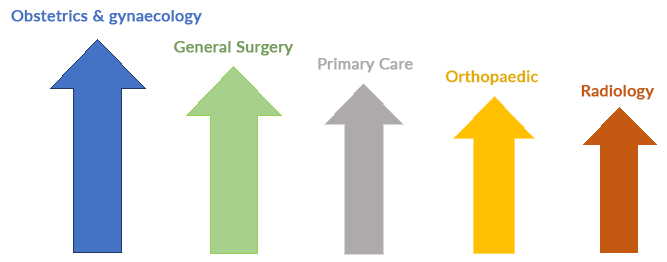
<style>
.page{position:relative;width:667px;height:262px;background:#ffffff}
.page>*{position:absolute;margin:0}
.t1{font:16px "Lato-Medium";color:#4472c4;font-weight:bold}
.t2{font:16px "Lato-Medium";color:#779e5d;font-weight:bold}
.t3{font:16px "Lato-Medium";color:#aeaaaa;font-weight:bold}
.t4{font:16px "Lato-Medium";color:#e4ac00;font-weight:bold}
.t5{font:16px "Lato-Medium";color:#c45911;font-weight:bold}
</style>
<div class="page">
<p class="t1" style="left:11px;top:10px;width:191px;height:15px">Obstetrics &amp; gynaecology</p>
<p class="t2" style="left:174px;top:41px;width:120px;height:15px">General Surgery</p>
<p class="t3" style="left:318px;top:58px;width:95px;height:15px">Primary Care</p>
<p class="t4" style="left:445px;top:70px;width:93px;height:16px">Orthopaedic</p>
<p class="t5" style="left:581px;top:85px;width:74px;height:15px">Radiology</p>
</div>
